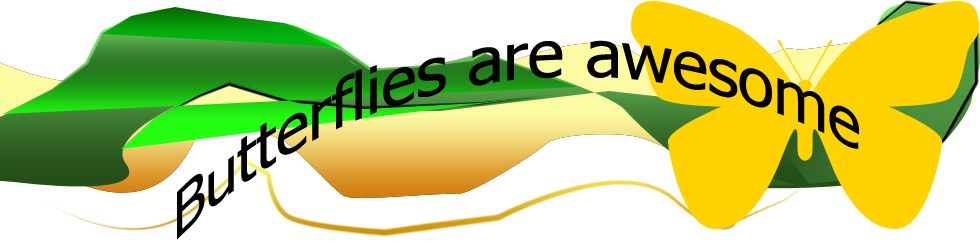
<style>
.page{position:relative;width:980px;height:250px;background:#ffffff}
.page>*{position:absolute;margin:0}
.t1{font:63.5px "Tahoma";color:#000000}
</style>
<div class="page">
<p class="t1" style="left:177px;top:40px;width:682px;height:200px">Butterflies are awesome</p>
</div>
